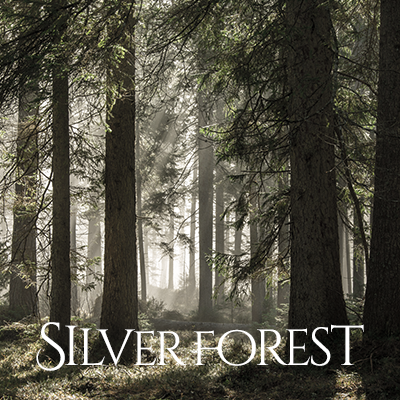
<style>
.page{position:relative;width:400px;height:400px}
.page>*{position:absolute;margin:0}
.t1{font:48px "CinzelDecorative-Regular";letter-spacing:-0.075em;color:#ffffff}
.t2{font:60px "CinzelDecorative-Regular";letter-spacing:-0.075em;color:#ffffff}
.t3{font:56px "CinzelDecorative-Regular";letter-spacing:-0.075em;color:#ffffff}
.t4{font:52px "CinzelDecorative-Regular";letter-spacing:-0.18em;color:#ffffff}
.t5{font:50.7px "CinzelDecorative-Regular";letter-spacing:-0.075em;color:#ffffff}
.t6{font:49.3px "CinzelDecorative-Regular";letter-spacing:-0.075em;color:#ffffff}
.t7{font:53.3px "CinzelDecorative-Regular";letter-spacing:-0.075em;color:#ffffff}
</style>
<div class="page">
<p class="t1" style="left:36px;top:322px;width:328px;height:49px"><span class="t2">S</span><span class="t3">i</span><span class="t4">l</span><span class="t5">v</span>er F<span class="t6">o</span><span class="t5">re</span><span class="t7">s</span><span class="t3">t</span></p>
</div>
